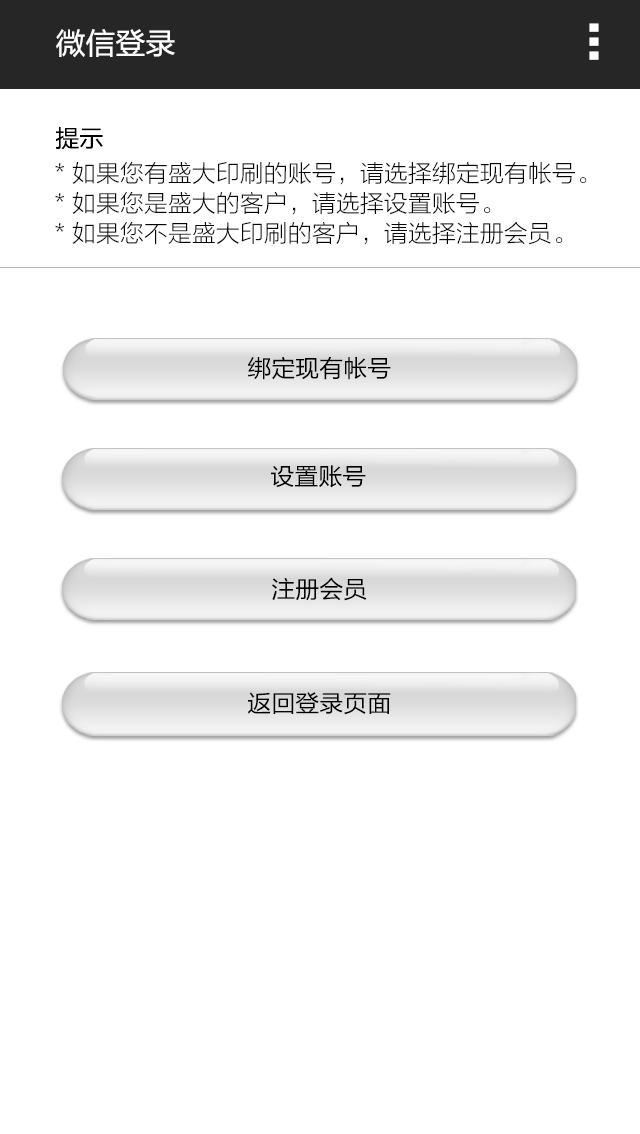
<style>
.page{position:relative;width:640px;height:1134px;background:#ffffff}
.page>*{position:absolute;margin:0}
.t1{font:30px "FZLTHK--GBK1-0";color:#ffffff}
.t2{font:72px/14px "FZLTHK--GBK1-0";color:#ffffff}
.t3{font:24px "FZLTHK--GBK1-0";color:#000000}
.t4{font:24px/30px "FZLTKHK--GBK1-0";color:#040404}
.t5{font:24px "FZLTHJW--GB1-0";color:#000000}
</style>
<div class="page">
<p class="t1" style="left:56px;top:29px;width:119px;height:29px">微信登录</p>
<p class="t2" style="left:589px;top:23px;width:10px;height:37px">.<br>.<br>.</p>
<p class="t3" style="left:56px;top:127px;width:47px;height:23px">提示</p>
<p class="t4" style="left:55px;top:162px;width:532px;height:83px">* 如果您有盛大印刷的账号，请选择绑定现有帐号。<br>* 如果您是盛大的客户，请选择设置账号。<br>* 如果您不是盛大印刷的客户，请选择注册会员。</p>
<p class="t5" style="left:248px;top:356px;width:143px;height:24px">绑定现有帐号</p>
<p class="t5" style="left:271px;top:465px;width:95px;height:23px">设置账号</p>
<p class="t5" style="left:272px;top:577px;width:95px;height:24px">注册会员</p>
<p class="t5" style="left:248px;top:692px;width:143px;height:23px">返回登录页面</p>
</div>
